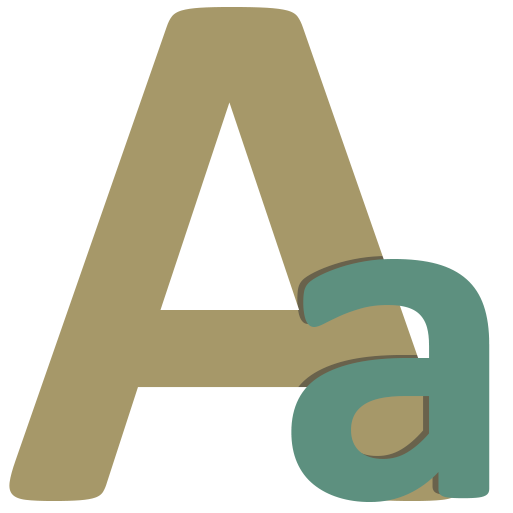
<style>
.page{position:relative;width:513px;height:513px;background:#ffffff}
.page>*{position:absolute;margin:0}
.t1{font:774.7px "Helvetica-Bold";color:#a69869}
.t2{font:496.8px "Helvetica-Bold";color:#5d907f}
</style>
<div class="page">
<p class="t1" style="left:9px;top:7px;width:452px;height:494px">A</p>
<p class="t2" style="left:285px;top:256px;width:199px;height:243px">a</p>
<p class="t2" style="left:291px;top:259px;width:199px;height:243px">a</p>
</div>
